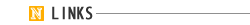
<style>
.page{position:relative;width:250px;height:25px;background:#ffffff}
.page>*{position:absolute;margin:0}
.t1{font:16px "AdobeFanHeitiStd-Bold";color:#343434;font-weight:bold}
</style>
<div class="page">
<p class="t1" style="left:52px;top:6px;width:41px;height:14px">LINKS</p>
</div>
